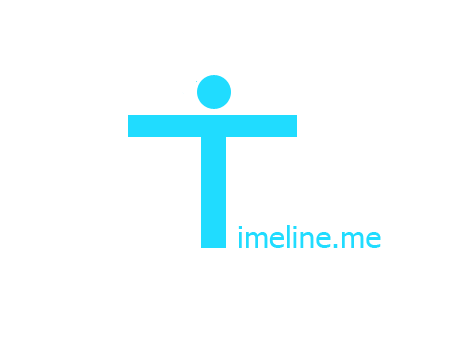
<style>
.page{position:relative;width:454px;height:340px;background:#ffffff}
.page>*{position:absolute;margin:0}
.t1{font:30px "Tahoma";color:#20dcff}
</style>
<div class="page">
<p class="t1" style="left:238px;top:225px;width:143px;height:23px">imeline.me</p>
</div>
